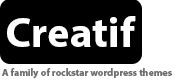
<style>
.page{position:relative;width:194px;height:83px;background:#ffffff}
.page>*{position:absolute;margin:0}
.t1{font:43px "MyriadPro-Bold";color:#ffffff}
.t2{font:10px "MyriadPro-Bold";color:#6f6f6f}
</style>
<div class="page">
<p class="t1" style="left:7px;top:16px;width:129px;height:31px">Creatif</p>
<p class="t2" style="left:2px;top:68px;width:170px;height:11px">A family of rockstar wordpress themes</p>
</div>
